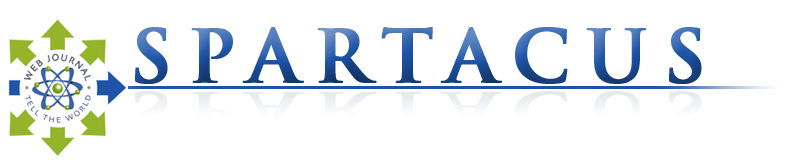
<style>
.page{position:relative;width:800px;height:166px;background:#ffffff}
.page>*{position:absolute;margin:0}
.t1{font:72px "TrajanPro-Bold";letter-spacing:0.2em;font-weight:bold}
.t2{font:50.4px "TrajanPro-Bold";letter-spacing:0.2em;color:#f8f9fa;font-weight:bold;scale:1.43 1}
</style>
<div class="page">
<p class="t1" style="left:135px;top:27px;width:567px;height:57px">SPARTACUS</p>
<p class="t2" style="left:135px;top:91px;width:567px;height:41px">SPARTACUS</p>
</div>
